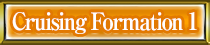
<style>
.page{position:relative;width:210px;height:45px}
.page>*{position:absolute;margin:0}
.t1{font:24px "RyuminPro-ExBold";letter-spacing:-0.08em;color:#ffffff;scale:0.9 1}
</style>
<div class="page">
<p class="t1" style="left:12px;top:12px;width:185px;height:22px">Cruising Formation 1</p>
</div>
